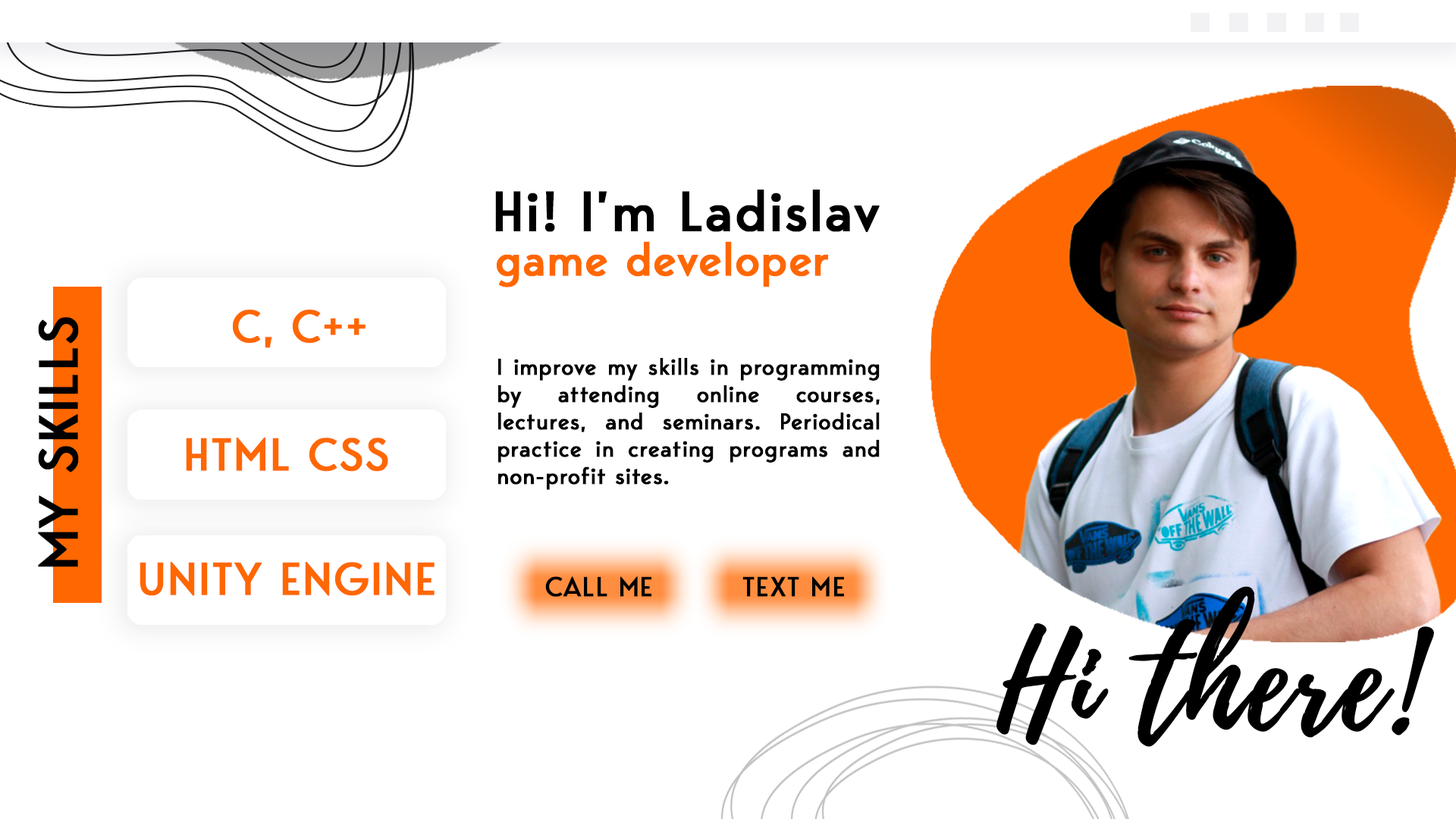
<style>
.page{position:relative;width:1456px;height:819px;background:#ffffff}
.page>*{position:absolute;margin:0}
.t1{font:55.7px "BergenSans";color:#000000;font-weight:bold}
.t2{font:45.5px "BergenSans";color:#ff6700;font-weight:bold}
.t3{font:54.3px "BergenSans";color:#000000;font-weight:bold}
.t4{font:22.7px "BergenSans";color:#000001;font-weight:bold}
.t5{font:27.3px "BergenSans";color:#000001;font-weight:bold}
.t6{font:133.6px "Playlist-Script";color:#000000;font-weight:bold}
</style>
<div class="page">
<p class="t1" style="left:495px;top:190px;width:385px;height:42px">Hi! I’m Ladislav</p>
<p class="t2" style="left:497px;top:241px;width:331px;height:46px">game developer</p>
<p class="t3" style="left:38px;top:317px;width:41px;height:250px;rotate:-90deg">MY SKILLS</p>
<p class="t2" style="left:233px;top:309px;width:133px;height:39px">C, C++</p>
<p class="t4" style="left:498px;top:358px;width:382px;height:132px;text-align:justify">I improve my skills in programming by attending online courses, lectures, and seminars. Periodical practice in creating programs and non-profit sites.</p>
<p class="t2" style="left:186px;top:438px;width:202px;height:34px">HTML CSS</p>
<p class="t2" style="left:140px;top:562px;width:295px;height:34px">UNITY ENGINE</p>
<p class="t5" style="left:545px;top:576px;width:106px;height:21px">CALL ME</p>
<p class="t5" style="left:742px;top:576px;width:102px;height:21px">TEXT ME</p>
<p class="t6" style="left:996px;top:586px;width:438px;height:161px">Hi there!</p>
</div>
